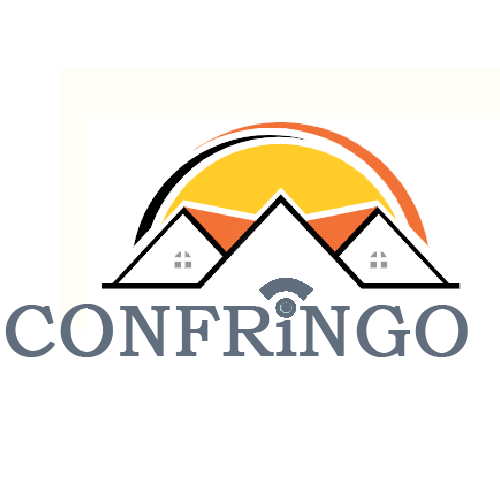
<style>
.page{position:relative;width:500px;height:500px;background:#ffffff}
.page>*{position:absolute;margin:0}
.t1{font:72px "BookmanOldStyle";color:#616e7e;font-weight:bold}
</style>
<div class="page">
<p class="t1" style="left:5px;top:303px;width:463px;height:54px">CONFRiNGO</p>
<p class="t1" style="left:60px;top:304px;width:53px;height:52px">O</p>
</div>
